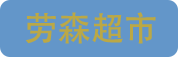
<style>
.page{position:relative;width:178px;height:57px;background:#6396c9}
.page>*{position:absolute;margin:0}
.t1{font:33.3px "STHeitiTC-Medium";color:#bba846}
</style>
<div class="page">
<p class="t1" style="left:26px;top:12px;width:130px;height:32px">劳森超市</p>
</div>
